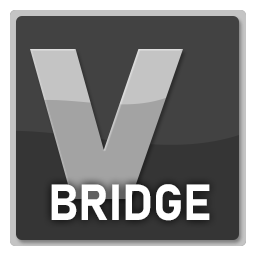
<style>
.page{position:relative;width:256px;height:256px;background:#424242}
.page>*{position:absolute;margin:0}
.t1{font:50.1px "Bahnschrift-Bold";color:#ffffff;text-transform:uppercase;scale:0.95 1}
</style>
<div class="page">
<p class="t1" style="left:51px;top:184px;width:159px;height:37px">Bridge</p>
</div>
